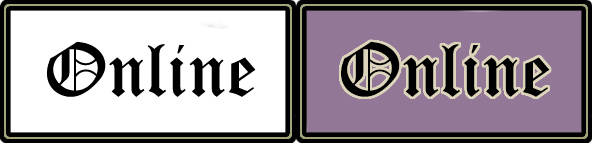
<style>
.page{position:relative;width:592px;height:143px;background:#ffffff}
.page>*{position:absolute;margin:0}
.t1{font:75px "OldEnglishTextMT";color:#000000}
</style>
<div class="page">
<p class="t1" style="left:47px;top:41px;width:209px;height:56px">Online</p>
<p class="t1" style="left:341px;top:41px;width:209px;height:56px">Online</p>
</div>
